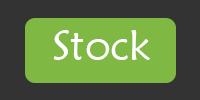
<style>
.page{position:relative;width:200px;height:100px;background:#333333}
.page>*{position:absolute;margin:0}
.t1{font:43px "MaiandraGD-Regular";color:#ffffff}
</style>
<div class="page">
<p class="t1" style="left:53px;top:30px;width:97px;height:30px">Stock</p>
</div>
